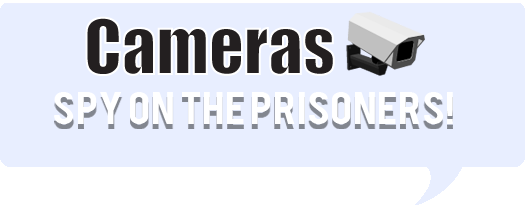
<style>
.page{position:relative;width:525px;height:205px;background:#e8eeff}
.page>*{position:absolute;margin:0}
.t1{font:35.9px "Bebas";letter-spacing:0.01em;color:#ffffff;scale:1.2 1}
</style>
<div class="page">
<p class="t1" style="left:54px;top:92px;width:399px;height:32px">Spy on the prisoners!</p>
</div>
